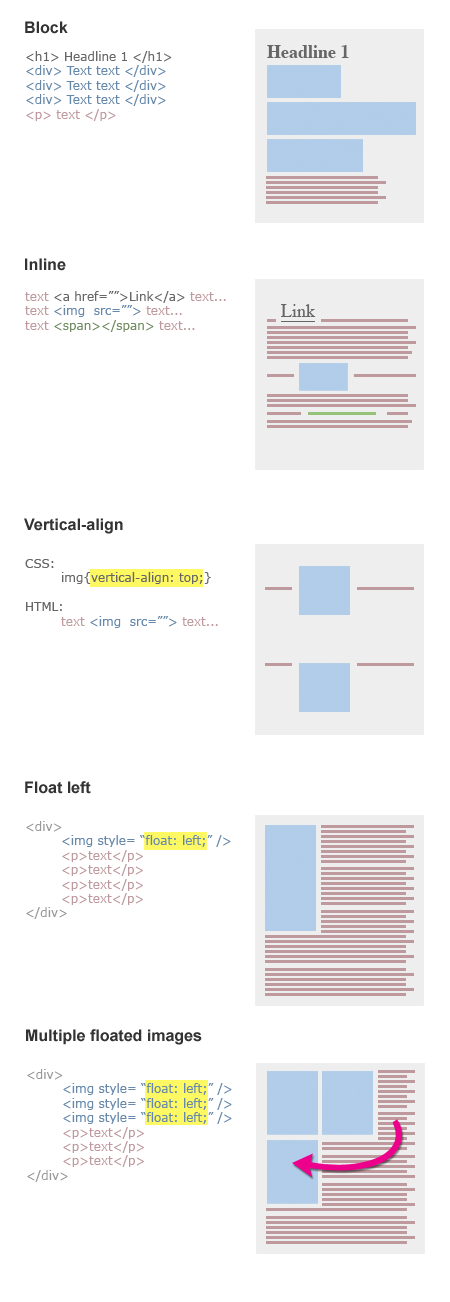
<style>
.page{position:relative;width:450px;height:1302px;background:#ffffff}
.page>*{position:absolute;margin:0}
.t1{font:16px "Arial-BoldMT";color:#333333}
.t2{font:12px "Verdana";color:#6588ab}
.t3{font:12px "Verdana";color:#666666}
.t4{font:12px "Verdana";color:#be999e}
.t5{font:18px "Times-Bold";color:#666666}
.t6{font:12px "Verdana";color:#718c61}
.t7{font:18px "Times-Roman";color:#666666;text-decoration:underline}
.t8{font:12px "Verdana";color:#999999}
</style>
<div class="page">
<p class="t1" style="left:25px;top:21px;width:43px;height:13px">Block</p>
<p class="t2" style="left:26px;top:51px;width:146px;height:70px"><span class="t3">&lt;h1&gt; Headline 1 &lt;/h1&gt;<br></span>&lt;div&gt; Text text &lt;/div&gt;<br>&lt;div&gt; Text text &lt;/div&gt;<br>&lt;div&gt; Text text &lt;/div&gt;<br><span class="t4">&lt;p&gt; text &lt;/p&gt;</span></p>
<p class="t5" style="left:267px;top:45px;width:82px;height:13px">Headline 1</p>
<p class="t1" style="left:25px;top:258px;width:41px;height:13px">Inline</p>
<p class="t3" style="left:25px;top:291px;width:201px;height:41px"><span class="t4">text </span>&lt;a href=””&gt;Link&lt;/a&gt; <span class="t4">text...<br>text </span><span class="t2">&lt;img  src=””&gt; </span><span class="t4">text...<br>text </span><span class="t6">&lt;span&gt;&lt;/span&gt; </span><span class="t4">text...</span></p>
<p class="t7" style="left:281px;top:304px;width:35px;height:18px">Link</p>
<p class="t1" style="left:24px;top:518px;width:99px;height:16px">Vertical-align</p>
<p class="t3" style="left:25px;top:559px;width:193px;height:69px">CSS:<br> img{vertical-align: top;}<br><br>HTML:<br><span class="t4"> text </span><span class="t2">&lt;img  src=””&gt; </span><span class="t4">text...</span></p>
<p class="t1" style="left:25px;top:781px;width:66px;height:13px">Float left</p>
<p class="t4" style="left:26px;top:821px;width:205px;height:98px"><span class="t8">&lt;div&gt;<br> </span><span class="t2">&lt;img style= “float: left;” /&gt;<br></span> &lt;p&gt;text&lt;/p&gt;<br> &lt;p&gt;text&lt;/p&gt;<br> &lt;p&gt;text&lt;/p&gt;<br> &lt;p&gt;text&lt;/p&gt;<br><span class="t8">&lt;/div&gt;</span></p>
<p class="t1" style="left:26px;top:1029px;width:176px;height:16px">Multiple floated images</p>
<p class="t2" style="left:27px;top:1069px;width:205px;height:113px"><span class="t8">&lt;div&gt;<br> </span>&lt;img style= “float: left;” /&gt;<br> &lt;img style= “float: left;” /&gt;<br> &lt;img style= “float: left;” /&gt;<br><span class="t4"> &lt;p&gt;text&lt;/p&gt;<br> &lt;p&gt;text&lt;/p&gt;<br> &lt;p&gt;text&lt;/p&gt;<br></span><span class="t8">&lt;/div&gt;</span></p>
</div>
